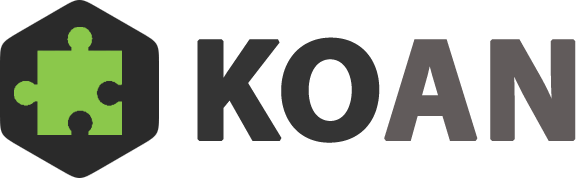
<style>
.page{position:relative;width:576px;height:178px;background:#ffffff}
.page>*{position:absolute;margin:0}
.t1{font:145px "MyriadPro-Bold";color:#343434;font-weight:bold}
.t2{font:145px "MyriadPro-Bold";color:#615b5b;font-weight:bold}
</style>
<div class="page">
<p class="t1" style="left:197px;top:37px;width:379px;height:106px">KO<span class="t2">AN</span></p>
</div>
